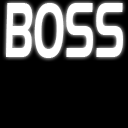
<style>
.page{position:relative;width:128px;height:128px;background:#000000}
.page>*{position:absolute;margin:0}
.t1{font:74px "HandelGothicTL-Regular";color:#ffffff;scale:0.54 1}
</style>
<div class="page">
<p class="t1" style="left:6px;top:3px;width:117px;height:55px">BOSS</p>
</div>
